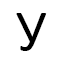
<style>
.page{position:relative;width:64px;height:64px;background:#ffffff}
.page>*{position:absolute;margin:0}
.t1{font:58.3px "Calibri";color:#000000}
</style>
<div class="page">
<p class="t1" style="left:16px;top:13px;width:31px;height:38px">У</p>
</div>
